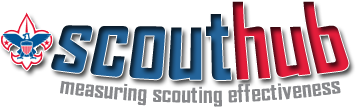
<style>
.page{position:relative;width:356px;height:107px;background:#ffffff}
.page>*{position:absolute;margin:0}
.t1{font:90px "AgencyFB-Bold"}
.t2{font:24px "AgencyFB-Bold";color:#87888b}
</style>
<div class="page">
<p class="t1" style="left:51px;top:1px;width:298px;height:79px">scouthub</p>
<p class="t2" style="left:60px;top:81px;width:281px;height:26px">measuring scouting effectiveness</p>
</div>
